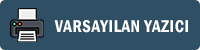
<style>
.page{position:relative;width:200px;height:50px;background:#2f4f64}
.page>*{position:absolute;margin:0}
.t1{font:17.8px "FranklinGothic-DemiCond";letter-spacing:0.04em;color:#ffffff;scale:0.93 1}
</style>
<div class="page">
<p class="t1" style="left:54px;top:20px;width:134px;height:13px">VARSAYILAN YAZICI</p>
</div>
